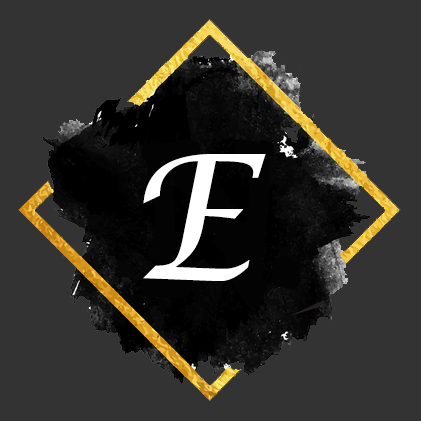
<style>
.page{position:relative;width:421px;height:421px;background:#333333}
.page>*{position:absolute;margin:0}
.t1{font:170.7px "LucidaCalligraphy-Italic";color:#ffffff}
</style>
<div class="page">
<p class="t1" style="left:143px;top:154px;width:123px;height:127px">E</p>
</div>
